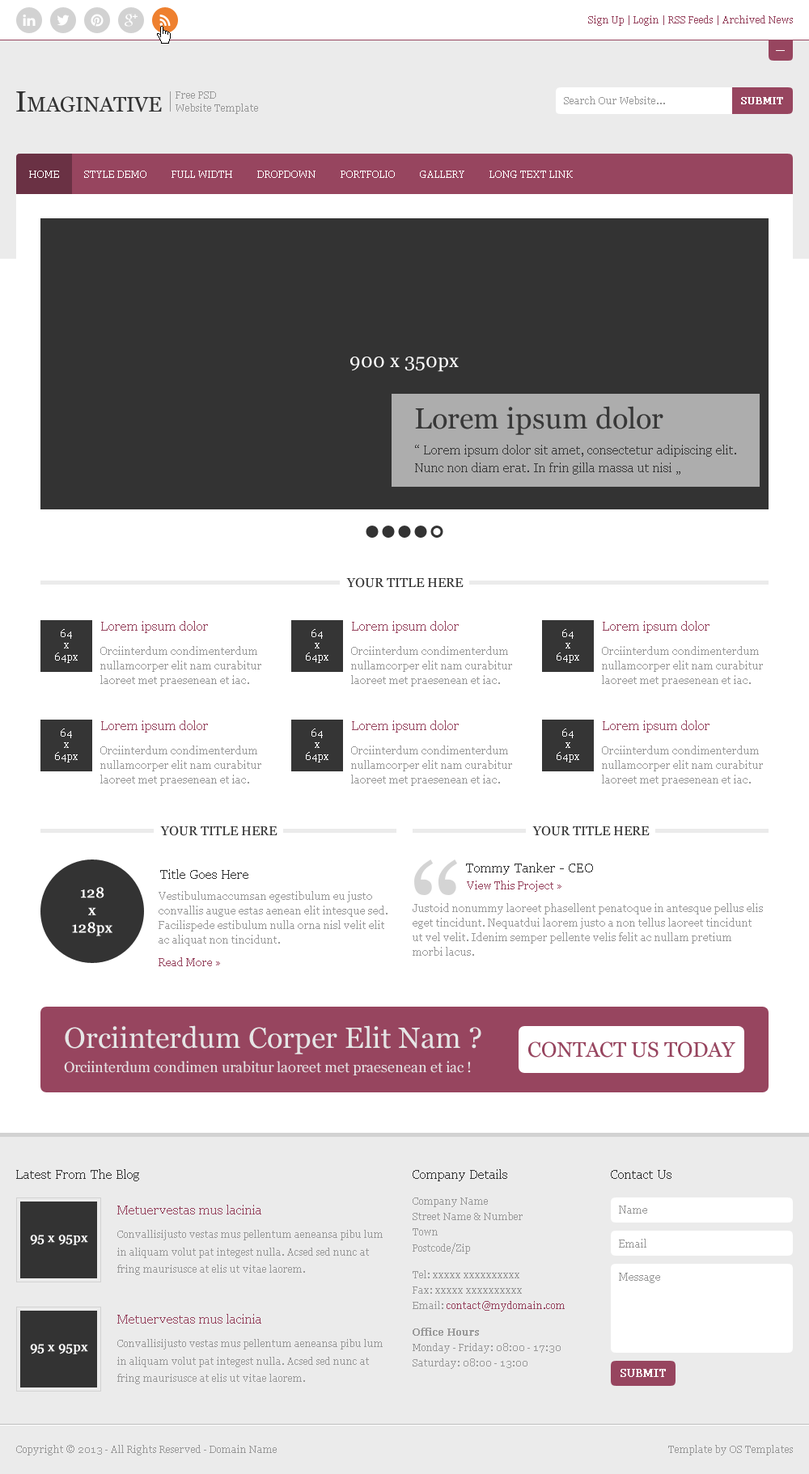
<style>
.page{position:relative;width:809px;height:1474px;background:#ffffff}
.page>*{position:absolute;margin:0}
.t1{font:9.7px "Georgia";color:#97455f}
.t2{font:21px "Georgia";color:#333333}
.t3{font:29.1px "Georgia";color:#333333}
.t4{font:9.7px/12.6px "Georgia";color:#999999}
.t5{font:9.7px "Georgia";color:#999999}
.t6{font:9.7px "Georgia";color:#ffffff;font-weight:bold}
.t7{font:9.7px "Georgia";color:#ffffff}
.t8{font:19.4px "Georgia";color:#ffffff}
.t9{font:29.1px "Georgia";color:#383838}
.t10{font:12.9px/18.1px "Georgia";color:#383838}
.t11{font:12.9px "Georgia";color:#333333}
.t12{font:9.7px/11.6px "Georgia";color:#ffffff}
.t13{font:12.9px "Georgia";color:#97455f}
.t14{font:10.5px/14.7px "Georgia";color:#999999}
.t15{font:10.5px "Georgia";color:#97455f}
.t16{font:14.6px/17.5px "Georgia";color:#ffffff;font-weight:bold}
.t17{font:29.1px "Georgia";color:#e5e5e5}
.t18{font:21px "Georgia";color:#97455f}
.t19{font:14.6px "Georgia";color:#e5e5e5}
.t20{font:9.7px/15.5px "Georgia";color:#999999}
.t21{font:10.5px "Georgia";color:#989898}
.t22{font:12.9px "Georgia";color:#ffffff;font-weight:bold}
.t23{font:9.7px/17.5px "Georgia";color:#999999}
.t24{font:9.7px/15.5px "Georgia";color:#97455f}
.t25{font:9.7px/15.5px "Georgia";color:#999999;font-weight:bold}
.t26{font:10.5px "Georgia";color:#ffffff;font-weight:bold}
</style>
<div class="page">
<p class="t1" style="left:588px;top:15px;width:205px;height:11px">Sign Up | Login | RSS Feeds | Archived News</p>
<p class="t2" style="left:16px;top:91px;width:146px;height:21px"><span class="t3">I</span>MAGINATIVE</p>
<p class="t4" style="left:176px;top:91px;width:82px;height:23px">Free PSD<br>Website Template</p>
<p class="t5" style="left:564px;top:96px;width:101px;height:8px">Search Our Website...</p>
<p class="t6" style="left:741px;top:97px;width:42px;height:7px">SUBMIT</p>
<p class="t7" style="left:29px;top:171px;width:30px;height:7px">HOME</p>
<p class="t7" style="left:84px;top:171px;width:62px;height:7px">STYLE DEMO</p>
<p class="t7" style="left:171px;top:171px;width:61px;height:7px">FULL WIDTH</p>
<p class="t7" style="left:257px;top:171px;width:58px;height:7px">DROPDOWN</p>
<p class="t7" style="left:340px;top:171px;width:55px;height:7px">PORTFOLIO</p>
<p class="t7" style="left:420px;top:171px;width:44px;height:7px">GALLERY</p>
<p class="t7" style="left:489px;top:171px;width:84px;height:7px">LONG TEXT LINK</p>
<p class="t8" style="left:350px;top:357px;width:109px;height:15px">900 x 350px</p>
<p class="t9" style="left:415px;top:406px;width:248px;height:29px">Lorem ipsum dolor</p>
<p class="t10" style="left:415px;top:445px;width:321px;height:30px">“ Lorem ipsum dolor sit amet, consectetur adipiscing elit. Nunc non diam erat. In frin gilla massa ut nisi „</p>
<p class="t11" style="left:346px;top:577px;width:117px;height:11px">YOUR TITLE HERE</p>
<p class="t12" style="left:55px;top:629px;width:23px;height:34px;text-align:center">64<br>x<br>64px</p>
<p class="t13" style="left:101px;top:621px;width:107px;height:12px">Lorem ipsum dolor</p>
<p class="t12" style="left:306px;top:629px;width:22px;height:34px;text-align:center">64<br>x<br>64px</p>
<p class="t13" style="left:352px;top:621px;width:107px;height:12px">Lorem ipsum dolor</p>
<p class="t12" style="left:556px;top:629px;width:23px;height:34px;text-align:center">64<br>x<br>64px</p>
<p class="t13" style="left:603px;top:621px;width:106px;height:12px">Lorem ipsum dolor</p>
<p class="t14" style="left:100px;top:646px;width:161px;height:41px">Orciinterdum condimenterdum nullamcorper elit nam curabitur laoreet met praesenean et iac.</p>
<p class="t14" style="left:351px;top:646px;width:161px;height:41px">Orciinterdum condimenterdum nullamcorper elit nam curabitur laoreet met praesenean et iac.</p>
<p class="t14" style="left:602px;top:646px;width:161px;height:41px">Orciinterdum condimenterdum nullamcorper elit nam curabitur laoreet met praesenean et iac.</p>
<p class="t13" style="left:101px;top:721px;width:107px;height:12px">Lorem ipsum dolor</p>
<p class="t13" style="left:352px;top:721px;width:107px;height:12px">Lorem ipsum dolor</p>
<p class="t13" style="left:603px;top:721px;width:106px;height:12px">Lorem ipsum dolor</p>
<p class="t12" style="left:55px;top:729px;width:23px;height:34px;text-align:center">64<br>x<br>64px</p>
<p class="t12" style="left:306px;top:729px;width:22px;height:34px;text-align:center">64<br>x<br>64px</p>
<p class="t12" style="left:556px;top:729px;width:23px;height:34px;text-align:center">64<br>x<br>64px</p>
<p class="t14" style="left:100px;top:746px;width:161px;height:40px">Orciinterdum condimenterdum nullamcorper elit nam curabitur laoreet met praesenean et iac.</p>
<p class="t14" style="left:351px;top:746px;width:161px;height:40px">Orciinterdum condimenterdum nullamcorper elit nam curabitur laoreet met praesenean et iac.</p>
<p class="t14" style="left:602px;top:746px;width:161px;height:40px">Orciinterdum condimenterdum nullamcorper elit nam curabitur laoreet met praesenean et iac.</p>
<p class="t11" style="left:160px;top:826px;width:117px;height:10px">YOUR TITLE HERE</p>
<p class="t11" style="left:532px;top:826px;width:117px;height:10px">YOUR TITLE HERE</p>
<p class="t11" style="left:160px;top:869px;width:88px;height:10px">Title Goes Here</p>
<p class="t11" style="left:466px;top:863px;width:127px;height:12px">Tommy Tanker - CEO</p>
<p class="t15" style="left:467px;top:881px;width:94px;height:11px">View This Project »</p>
<p class="t16" style="left:72px;top:887px;width:40px;height:50px;text-align:center">128<br>x<br>128px</p>
<p class="t14" style="left:159px;top:891px;width:228px;height:55px">Vestibulumaccumsan egestibulum eu justo convallis augue estas aenean elit intesque sed. Facilispede estibulum nulla orna nisl velit elit ac aliquat non tincidunt.</p>
<p class="t14" style="left:412px;top:903px;width:351px;height:53px">Justoid nonummy laoreet phasellent penatoque in antesque pellus elis eget tincidunt. Nequatdui laorem justo a non tellus laoreet tincidunt ut vel velit. Idenim semper pellente velis felit ac nullam pretium morbi lacus.</p>
<p class="t15" style="left:159px;top:958px;width:61px;height:8px">Read More »</p>
<p class="t17" style="left:65px;top:1026px;width:416px;height:29px">Orciinterdum Corper Elit Nam ?</p>
<p class="t18" style="left:528px;top:1042px;width:207px;height:16px">CONTACT US TODAY</p>
<p class="t19" style="left:64px;top:1061px;width:407px;height:15px">Orciinterdum condimen urabitur laoreet met praesenean et iac !</p>
<p class="t11" style="left:16px;top:1169px;width:123px;height:13px">Latest From The Blog</p>
<p class="t11" style="left:412px;top:1169px;width:95px;height:13px">Company Details</p>
<p class="t11" style="left:611px;top:1170px;width:60px;height:9px">Contact Us</p>
<p class="t13" style="left:117px;top:1205px;width:144px;height:10px">Metuervestas mus lacinia</p>
<p class="t20" style="left:412px;top:1198px;width:110px;height:56px">Company Name<br>Street Name &amp; Number<br>Town<br>Postcode/Zip</p>
<p class="t21" style="left:619px;top:1206px;width:28px;height:8px">Name</p>
<p class="t22" style="left:30px;top:1235px;width:58px;height:11px">95 x 95px</p>
<p class="t23" style="left:117px;top:1230px;width:266px;height:45px">Convallisijusto vestas mus pellentum aeneansa pibu lum in aliquam volut pat integest nulla. Acsed sed nunc at fring maurisusce at elis ut vitae laorem.</p>
<p class="t21" style="left:619px;top:1239px;width:27px;height:9px">Email</p>
<p class="t20" style="left:412px;top:1271px;width:153px;height:41px">Tel: xxxxx xxxxxxxxxx<br>Fax: xxxxx xxxxxxxxxx<br>Email: <span class="t24">contact@mydomain.com</span></p>
<p class="t21" style="left:619px;top:1273px;width:41px;height:11px">Message</p>
<p class="t13" style="left:117px;top:1314px;width:144px;height:10px">Metuervestas mus lacinia</p>
<p class="t20" style="left:412px;top:1328px;width:148px;height:41px"><span class="t25">Office Hours<br></span>Monday - Friday: 08:00 - 17:30<br>Saturday: 08:00 - 13:00</p>
<p class="t22" style="left:30px;top:1344px;width:58px;height:11px">95 x 95px</p>
<p class="t23" style="left:117px;top:1339px;width:266px;height:46px">Convallisijusto vestas mus pellentum aeneansa pibu lum in aliquam volut pat integest nulla. Acsed sed nunc at fring maurisusce at elis ut vitae laorem.</p>
<p class="t26" style="left:620px;top:1369px;width:46px;height:8px">SUBMIT</p>
<p class="t5" style="left:16px;top:1445px;width:261px;height:11px">Copyright © 2013 - All Rights Reserved - Domain Name</p>
<p class="t5" style="left:668px;top:1445px;width:125px;height:11px">Template by OS Templates</p>
</div>
